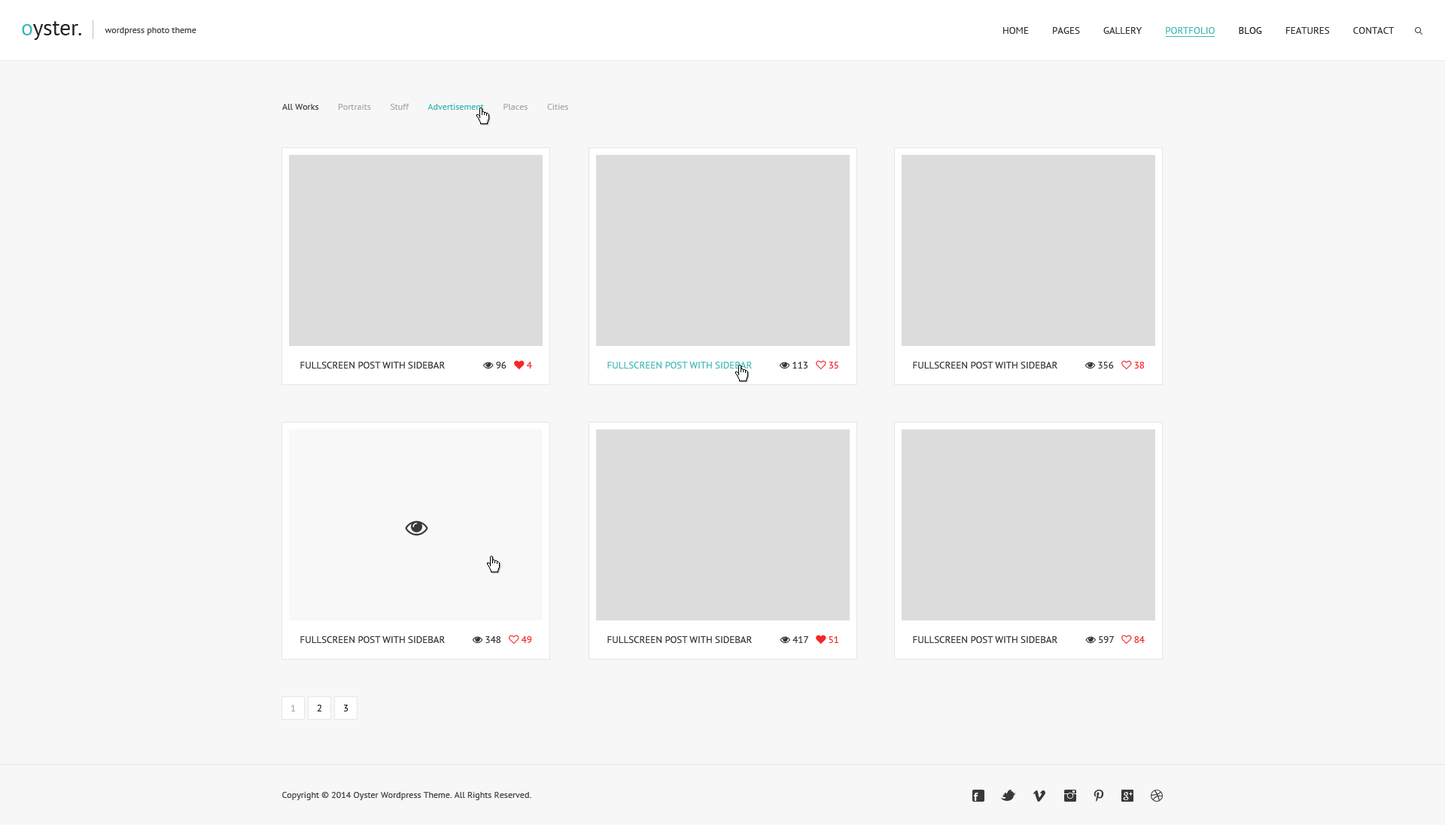
<style>
.page{position:relative;width:1445px;height:825px;background:#f7f7f7}
.page>*{position:absolute;margin:0}
.t1{font:9px "PTSans-Regular";color:#434343}
.t2{font:9.8px "PTSans-Regular";color:#343434;text-transform:uppercase}
.t3{font:9.8px "PTSans-Regular";color:#40b7b8;text-transform:uppercase}
.t4{font:9.8px "PTSans-Regular";color:#222222;text-transform:uppercase}
.t5{font:9px "PTSans-Regular";color:#aaaaaa}
.t6{font:9px "PTSans-Regular";color:#444444}
.t7{font:9px "PTSans-Regular";color:#40b7b8}
.t8{font:9.8px "PTSans-Regular";color:#aaaaaa;text-transform:uppercase}
</style>
<div class="page">
<p class="t1" style="left:105px;top:27px;width:91px;height:8px">wordpress photo theme</p>
<p class="t2" style="left:1003px;top:27px;width:391px;height:7px">Home         Pages         Gallery         <span class="t3">Portfolio         </span><span class="t4">Blog         </span>Features         Contact</p>
<p class="t5" style="left:282px;top:104px;width:286px;height:6px"><span class="t6">All Works        </span>Portraits        Stuff        <span class="t7">Advertisement        </span>Places        Cities</p>
<p class="t2" style="left:300px;top:362px;width:145px;height:7px">Fullscreen Post with Sidebar</p>
<p class="t3" style="left:607px;top:362px;width:145px;height:7px">Fullscreen Post with Sidebar</p>
<p class="t2" style="left:913px;top:362px;width:144px;height:7px">Fullscreen Post with Sidebar</p>
<p class="t2" style="left:300px;top:637px;width:145px;height:6px">Fullscreen Post with Sidebar</p>
<p class="t2" style="left:607px;top:637px;width:145px;height:6px">Fullscreen Post with Sidebar</p>
<p class="t2" style="left:913px;top:637px;width:144px;height:6px">Fullscreen Post with Sidebar</p>
<p class="t8" style="left:290px;top:705px;width:6px;height:7px">1</p>
<p class="t4" style="left:317px;top:705px;width:5px;height:7px">2</p>
<p class="t4" style="left:344px;top:705px;width:4px;height:7px">3</p>
<p class="t1" style="left:282px;top:792px;width:249px;height:9px">Copyright © 2014 Oyster Wordpress Theme. All Rights Reserved.</p>
</div>
